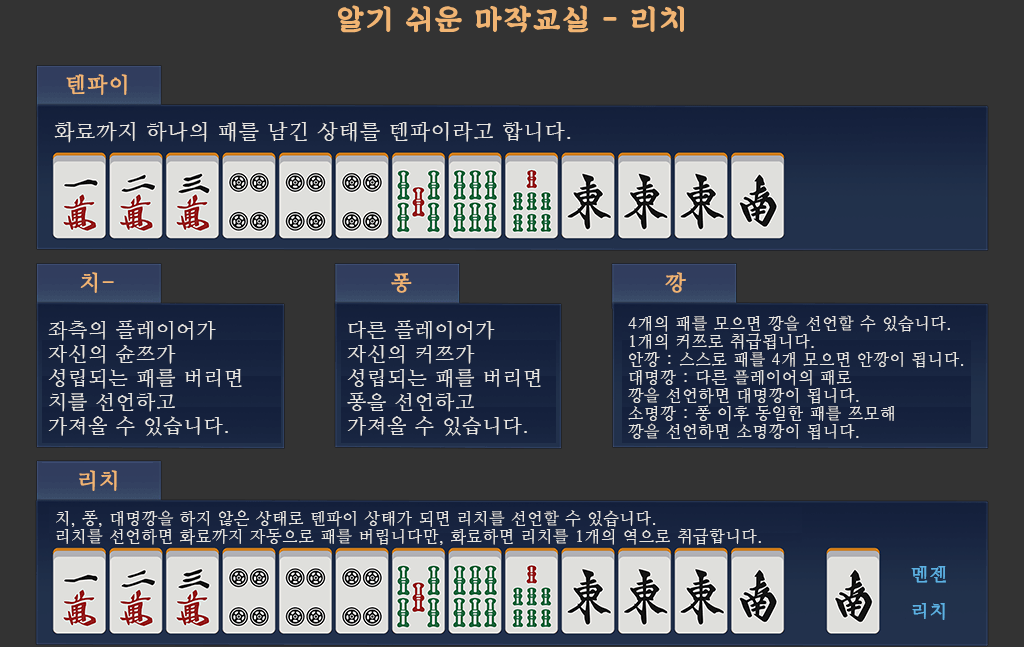
<style>
.page{position:relative;width:1024px;height:647px;background:#333333}
.page>*{position:absolute;margin:0}
.t1{font:29px "SDKukdetopokki-aLt";letter-spacing:0.06em;color:#f1b472;font-weight:bold}
.t2{font:21px "NanumMyeongjo";letter-spacing:0.06em;color:#f1b472;font-weight:bold}
.t3{font:21px "NanumMyeongjo";letter-spacing:0.06em;color:#e7e5e1}
.t4{font:16px/18px "NanumMyeongjo";letter-spacing:0.06em;color:#e7e5e1}
.t5{font:20px/24px "NanumMyeongjo";letter-spacing:0.06em;color:#e7e5e1}
.t6{font:18px "NanumMyeongjo";letter-spacing:0.06em;color:#5cb1e3;font-weight:bold}
</style>
<div class="page">
<p class="t1" style="left:338px;top:5px;width:346px;height:28px">알기 쉬운 마작교실 - 리치</p>
<p class="t2" style="left:66px;top:74px;width:61px;height:21px">텐파이</p>
<p class="t3" style="left:54px;top:122px;width:517px;height:21px">화료까지 하나의 패를 남긴 상태를 텐파이라고 합니다.</p>
<p class="t2" style="left:80px;top:272px;width:34px;height:21px">치-</p>
<p class="t2" style="left:391px;top:273px;width:21px;height:20px">퐁</p>
<p class="t2" style="left:665px;top:272px;width:21px;height:21px">깡</p>
<p class="t4" style="left:628px;top:315px;width:336px;height:125px">4개의 패를 모으면 깡을 선언할 수 있습니다.<br>1개의 커쯔로 취급됩니다.<br>안깡 : 스스로 패를 4개 모으면 안깡이 됩니다.<br>대명깡 : 다른 플레이어의 패로<br>깡을 선언하면 대명깡이 됩니다.<br>소명깡 : 퐁 이후 동일한 패를 쯔모해<br>깡을 선언하면 소명깡이 됩니다.</p>
<p class="t5" style="left:48px;top:320px;width:194px;height:116px">좌측의 플레이어가<br>자신의 슌쯔가<br>성립되는 패를 버리면<br>치를 선언하고<br>가져올 수 있습니다.</p>
<p class="t5" style="left:347px;top:320px;width:194px;height:116px">다른 플레이어가<br>자신의 커쯔가<br>성립되는 패를 버리면<br>퐁을 선언하고<br>가져올 수 있습니다.</p>
<p class="t2" style="left:79px;top:470px;width:38px;height:21px">리치</p>
<p class="t4" style="left:56px;top:510px;width:705px;height:35px">치, 퐁, 대명깡을 하지 않은 상태로 텐파이 상태가 되면 리치를 선언할 수 있습니다.<br>리치를 선언하면 화료까지 자동으로 패를 버립니다만, 화료하면 리치를 1개의 역으로 취급합니다.</p>
<p class="t6" style="left:911px;top:566px;width:35px;height:17px">멘젠</p>
<p class="t6" style="left:912px;top:603px;width:33px;height:17px">리치</p>
</div>
